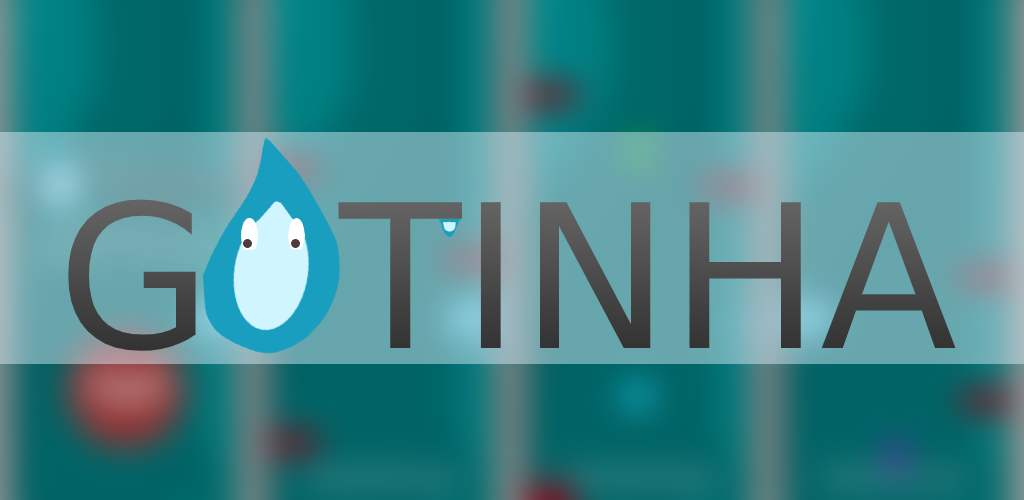
<style>
.page{position:relative;width:1024px;height:500px}
.page>*{position:absolute;margin:0}
.t1{font:200px "DejaVuSans";color:#4b4b4b}
</style>
<div class="page">
<p class="t1" style="left:68px;top:199px;width:888px;height:152px">G  TINHA</p>
</div>
